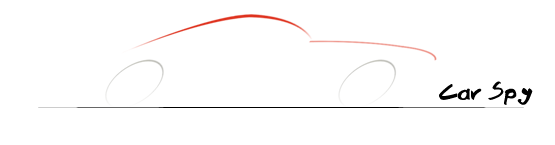
<style>
.page{position:relative;width:555px;height:145px;background:#ffffff}
.page>*{position:absolute;margin:0}
.t1{font:24px "Brook23";color:#000000}
</style>
<div class="page">
<p class="t1" style="left:439px;top:81px;width:94px;height:24px">Car Spy</p>
</div>
